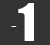
<style>
.page{position:relative;width:50px;height:45px;background:#333333}
.page>*{position:absolute;margin:0}
.t1{font:48.1px "Impact";color:#ffffff}
.t2{font:15px "Geneva";color:#ffffff}
</style>
<div class="page">
<p class="t1" style="left:18px;top:3px;width:16px;height:38px">1</p>
<p class="t2" style="left:11px;top:26px;width:6px;height:1px">-</p>
</div>
